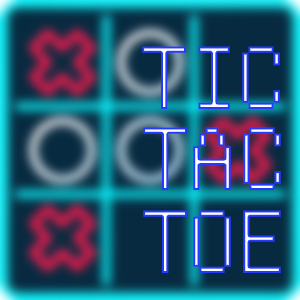
<style>
.page{position:relative;width:300px;height:300px}
.page>*{position:absolute;margin:0}
.t1{font:100px "GNUUnifontFull"}
</style>
<div class="page">
<p class="t1" style="left:142px;top:46px;width:138px;height:63px">TIC</p>
<p class="t1" style="left:143px;top:127px;width:138px;height:63px">TAC</p>
<p class="t1" style="left:143px;top:210px;width:138px;height:63px">TOE</p>
</div>
